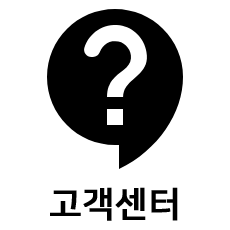
<style>
.page{position:relative;width:230px;height:230px;background:#ffffff}
.page>*{position:absolute;margin:0}
.t1{font:35px "NanumSquareB";color:#000000;font-weight:bold}
</style>
<div class="page">
<p class="t1" style="left:50px;top:187px;width:128px;height:34px">고객센터</p>
</div>
